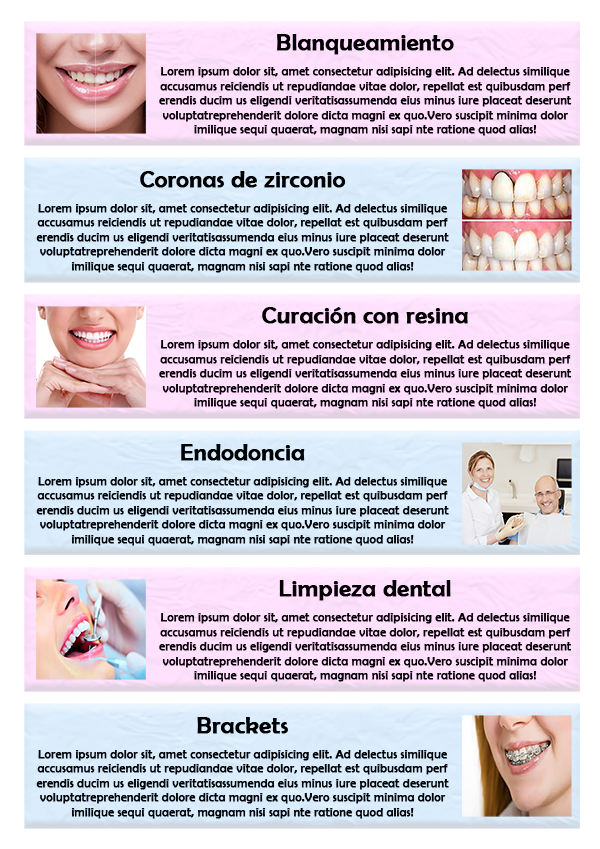
<style>
.page{position:relative;width:600px;height:849px}
.page>*{position:absolute;margin:0}
.t1{font:24.2px "BerlinSansFB-Reg";color:#000000;font-weight:bold}
.t2{font:12.1px "BerlinSansFB-Reg";color:#000000;font-weight:bold}
</style>
<div class="page">
<p class="t1" style="left:277px;top:34px;width:177px;height:21px">Blanqueamiento</p>
<p class="t2" style="left:159px;top:67px;width:413px;height:69px;text-align:center">Lorem ipsum dolor sit, amet consectetur adipisicing elit. Ad delectus similique<br>accusamus reiciendis ut repudiandae vitae dolor, repellat est quibusdam perf<br>erendis ducim us eligendi veritatisassumenda eius minus iure placeat deserunt<br>voluptatreprehenderit dolore dicta magni ex quo.Vero suscipit minima dolor<br>imilique sequi quaerat, magnam nisi sapi nte ratione quod alias!</p>
<p class="t1" style="left:140px;top:171px;width:206px;height:17px">Coronas de zirconio</p>
<p class="t2" style="left:36px;top:204px;width:413px;height:69px;text-align:center">Lorem ipsum dolor sit, amet consectetur adipisicing elit. Ad delectus similique<br>accusamus reiciendis ut repudiandae vitae dolor, repellat est quibusdam perf<br>erendis ducim us eligendi veritatisassumenda eius minus iure placeat deserunt<br>voluptatreprehenderit dolore dicta magni ex quo.Vero suscipit minima dolor<br>imilique sequi quaerat, magnam nisi sapi nte ratione quod alias!</p>
<p class="t1" style="left:262px;top:307px;width:206px;height:17px">Curación con resina</p>
<p class="t2" style="left:159px;top:340px;width:413px;height:69px;text-align:center">Lorem ipsum dolor sit, amet consectetur adipisicing elit. Ad delectus similique<br>accusamus reiciendis ut repudiandae vitae dolor, repellat est quibusdam perf<br>erendis ducim us eligendi veritatisassumenda eius minus iure placeat deserunt<br>voluptatreprehenderit dolore dicta magni ex quo.Vero suscipit minima dolor<br>imilique sequi quaerat, magnam nisi sapi nte ratione quod alias!</p>
<p class="t1" style="left:181px;top:444px;width:124px;height:17px">Endodoncia</p>
<p class="t2" style="left:36px;top:477px;width:413px;height:69px;text-align:center">Lorem ipsum dolor sit, amet consectetur adipisicing elit. Ad delectus similique<br>accusamus reiciendis ut repudiandae vitae dolor, repellat est quibusdam perf<br>erendis ducim us eligendi veritatisassumenda eius minus iure placeat deserunt<br>voluptatreprehenderit dolore dicta magni ex quo.Vero suscipit minima dolor<br>imilique sequi quaerat, magnam nisi sapi nte ratione quod alias!</p>
<p class="t1" style="left:279px;top:580px;width:172px;height:21px">Limpieza dental</p>
<p class="t2" style="left:159px;top:613px;width:413px;height:69px;text-align:center">Lorem ipsum dolor sit, amet consectetur adipisicing elit. Ad delectus similique<br>accusamus reiciendis ut repudiandae vitae dolor, repellat est quibusdam perf<br>erendis ducim us eligendi veritatisassumenda eius minus iure placeat deserunt<br>voluptatreprehenderit dolore dicta magni ex quo.Vero suscipit minima dolor<br>imilique sequi quaerat, magnam nisi sapi nte ratione quod alias!</p>
<p class="t1" style="left:197px;top:717px;width:91px;height:17px">Brackets</p>
<p class="t2" style="left:36px;top:750px;width:413px;height:69px;text-align:center">Lorem ipsum dolor sit, amet consectetur adipisicing elit. Ad delectus similique<br>accusamus reiciendis ut repudiandae vitae dolor, repellat est quibusdam perf<br>erendis ducim us eligendi veritatisassumenda eius minus iure placeat deserunt<br>voluptatreprehenderit dolore dicta magni ex quo.Vero suscipit minima dolor<br>imilique sequi quaerat, magnam nisi sapi nte ratione quod alias!</p>
</div>
